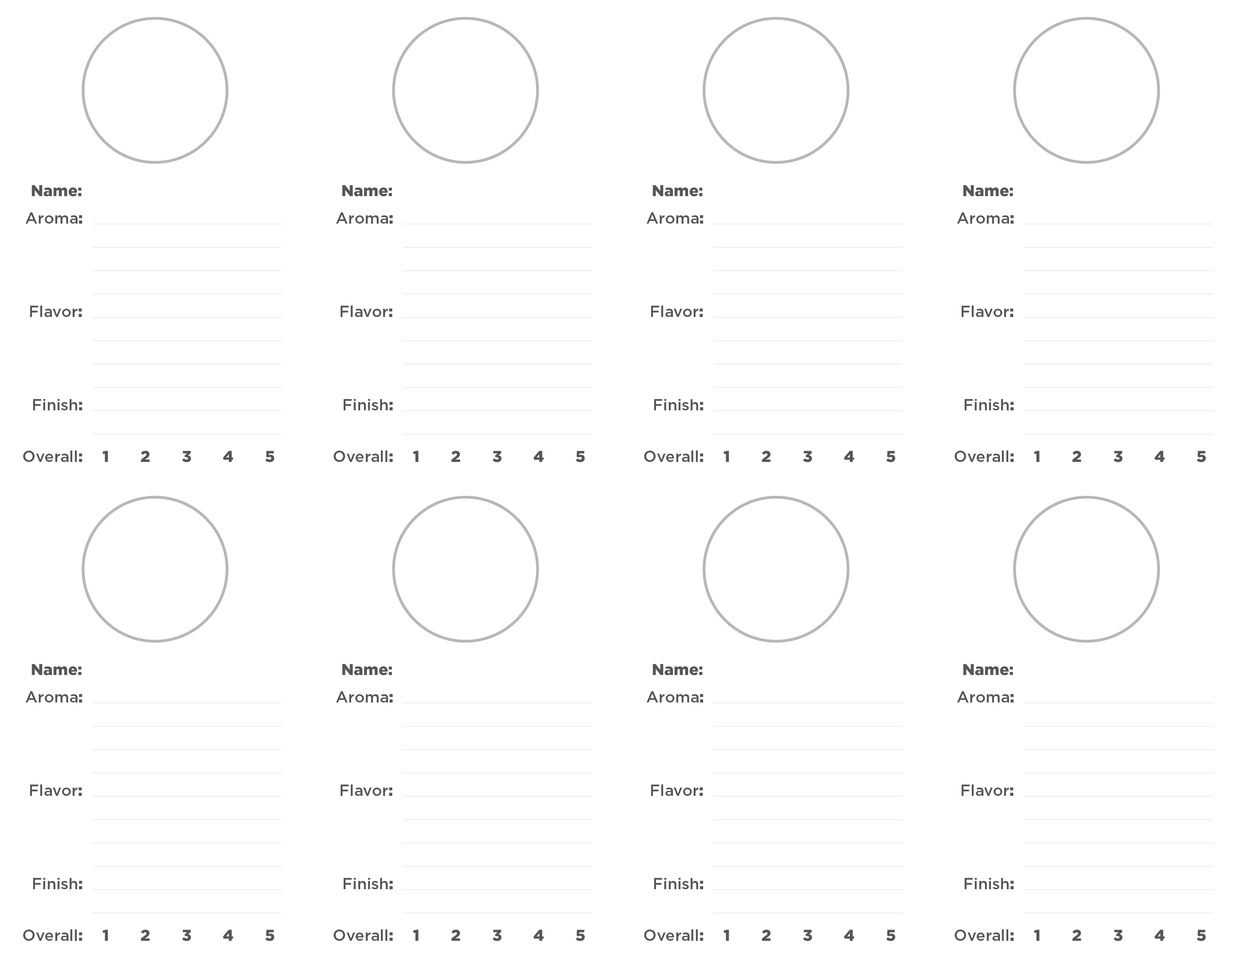
<style>
.page{position:relative;width:1242px;height:960px;background:#ffffff}
.page>*{position:absolute;margin:0}
.t1{font:15.7px "Gotham-Black";color:#565656}
.t2{font:15.7px "Gotham-Medium";color:#565656}
.t3{font:15.7px "Gotham-Black";letter-spacing:2em;color:#565656}
</style>
<div class="page">
<p class="t1" style="left:32px;top:185px;width:50px;height:11px">Name:</p>
<p class="t1" style="left:342px;top:185px;width:50px;height:11px">Name:</p>
<p class="t1" style="left:653px;top:185px;width:50px;height:11px">Name:</p>
<p class="t1" style="left:963px;top:185px;width:50px;height:11px">Name:</p>
<p class="t2" style="left:26px;top:212px;width:56px;height:12px">Aroma<span class="t1">:</span></p>
<p class="t2" style="left:336px;top:212px;width:57px;height:12px">Aroma<span class="t1">:</span></p>
<p class="t2" style="left:647px;top:212px;width:57px;height:12px">Aroma<span class="t1">:</span></p>
<p class="t2" style="left:957px;top:212px;width:57px;height:12px">Aroma<span class="t1">:</span></p>
<p class="t2" style="left:30px;top:305px;width:52px;height:12px">Flavor<span class="t1">:</span></p>
<p class="t2" style="left:341px;top:305px;width:52px;height:12px">Flavor<span class="t1">:</span></p>
<p class="t2" style="left:651px;top:305px;width:52px;height:12px">Flavor<span class="t1">:</span></p>
<p class="t2" style="left:962px;top:305px;width:52px;height:12px">Flavor<span class="t1">:</span></p>
<p class="t2" style="left:33px;top:399px;width:49px;height:11px">Finish<span class="t1">:</span></p>
<p class="t2" style="left:344px;top:399px;width:49px;height:11px">Finish<span class="t1">:</span></p>
<p class="t2" style="left:654px;top:399px;width:50px;height:11px">Finish<span class="t1">:</span></p>
<p class="t2" style="left:965px;top:399px;width:49px;height:11px">Finish<span class="t1">:</span></p>
<p class="t2" style="left:23px;top:450px;width:59px;height:12px">Overall<span class="t1">:</span></p>
<p class="t3" style="left:102px;top:451px;width:172px;height:11px">12345</p>
<p class="t2" style="left:334px;top:450px;width:59px;height:12px">Overall<span class="t1">:</span></p>
<p class="t3" style="left:413px;top:451px;width:172px;height:11px">12345</p>
<p class="t2" style="left:644px;top:450px;width:60px;height:12px">Overall<span class="t1">:</span></p>
<p class="t3" style="left:724px;top:451px;width:172px;height:11px">12345</p>
<p class="t2" style="left:955px;top:450px;width:59px;height:12px">Overall<span class="t1">:</span></p>
<p class="t3" style="left:1034px;top:451px;width:172px;height:11px">12345</p>
<p class="t1" style="left:32px;top:664px;width:50px;height:11px">Name:</p>
<p class="t1" style="left:342px;top:664px;width:50px;height:11px">Name:</p>
<p class="t1" style="left:653px;top:664px;width:50px;height:11px">Name:</p>
<p class="t1" style="left:963px;top:664px;width:50px;height:11px">Name:</p>
<p class="t2" style="left:26px;top:691px;width:56px;height:11px">Aroma<span class="t1">:</span></p>
<p class="t2" style="left:336px;top:691px;width:57px;height:11px">Aroma<span class="t1">:</span></p>
<p class="t2" style="left:647px;top:691px;width:57px;height:11px">Aroma<span class="t1">:</span></p>
<p class="t2" style="left:957px;top:691px;width:57px;height:11px">Aroma<span class="t1">:</span></p>
<p class="t2" style="left:30px;top:784px;width:52px;height:12px">Flavor<span class="t1">:</span></p>
<p class="t2" style="left:341px;top:784px;width:52px;height:12px">Flavor<span class="t1">:</span></p>
<p class="t2" style="left:651px;top:784px;width:52px;height:12px">Flavor<span class="t1">:</span></p>
<p class="t2" style="left:962px;top:784px;width:52px;height:12px">Flavor<span class="t1">:</span></p>
<p class="t2" style="left:33px;top:878px;width:49px;height:11px">Finish<span class="t1">:</span></p>
<p class="t2" style="left:344px;top:878px;width:49px;height:11px">Finish<span class="t1">:</span></p>
<p class="t2" style="left:654px;top:878px;width:50px;height:11px">Finish<span class="t1">:</span></p>
<p class="t2" style="left:965px;top:878px;width:49px;height:11px">Finish<span class="t1">:</span></p>
<p class="t2" style="left:23px;top:929px;width:59px;height:12px">Overall<span class="t1">:</span></p>
<p class="t3" style="left:102px;top:929px;width:172px;height:12px">12345</p>
<p class="t2" style="left:334px;top:929px;width:59px;height:12px">Overall<span class="t1">:</span></p>
<p class="t3" style="left:413px;top:929px;width:172px;height:12px">12345</p>
<p class="t2" style="left:644px;top:929px;width:60px;height:12px">Overall<span class="t1">:</span></p>
<p class="t3" style="left:724px;top:929px;width:172px;height:12px">12345</p>
<p class="t2" style="left:955px;top:929px;width:59px;height:12px">Overall<span class="t1">:</span></p>
<p class="t3" style="left:1034px;top:929px;width:172px;height:12px">12345</p>
</div>
